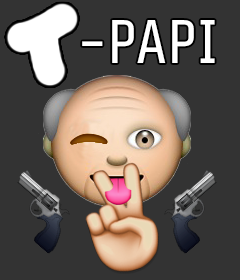
<style>
.page{position:relative;width:240px;height:280px;background:#333333}
.page>*{position:absolute;margin:0}
.t1{font:61.4px "Share-Tech";color:#ffffff;text-transform:uppercase}
</style>
<div class="page">
<p class="t1" style="left:82px;top:20px;width:133px;height:43px">-pAPI</p>
</div>
